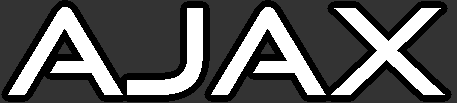
<style>
.page{position:relative;width:457px;height:103px;background:#333333}
.page>*{position:absolute;margin:0}
.t1{font:120px "GoodTimesRg-Regular";color:#ffffff}
</style>
<div class="page">
<p class="t1" style="left:8px;top:7px;width:437px;height:88px">AJAX</p>
</div>
